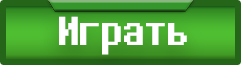
<style>
.page{position:relative;width:241px;height:65px}
.page>*{position:absolute;margin:0}
.t1{font:50px "Determination2";color:#ffffff}
</style>
<div class="page">
<p class="t1" style="left:59px;top:16px;width:128px;height:39px">Играть</p>
</div>
